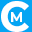
<style>
.page{position:relative;width:32px;height:32px;background:#05a5f3}
.page>*{position:absolute;margin:0}
.t1{font:42px "Montserrat-Bold";color:#ffffff}
.t2{font:14px "Montserrat-Bold";color:#ffffff}
</style>
<div class="page">
<p class="t1" style="left:1px;top:1px;width:28px;height:31px">С</p>
<p class="t2" style="left:11px;top:12px;width:11px;height:10px">M</p>
</div>
